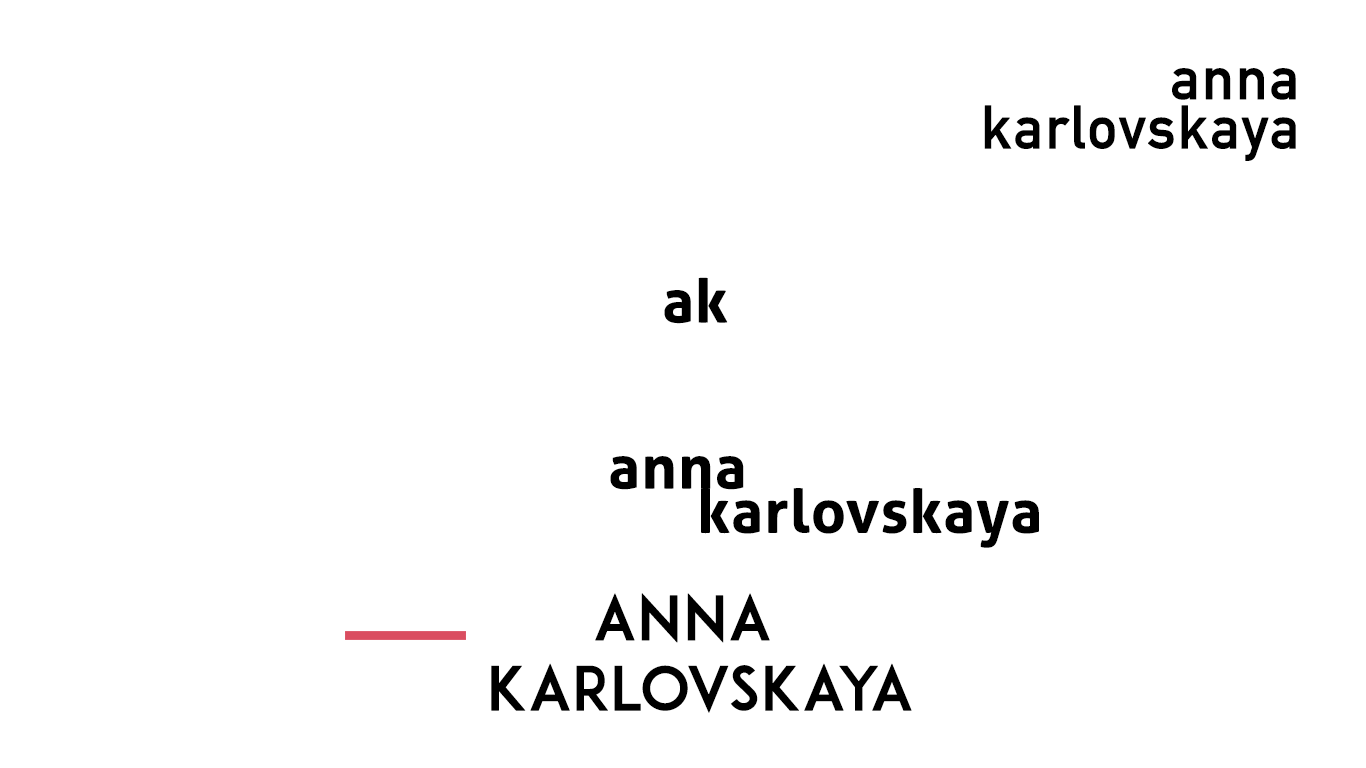
<style>
.page{position:relative;width:1366px;height:768px;background:#ffffff}
.page>*{position:absolute;margin:0}
.t1{font:60px "DINAlternate-Bold";color:#000000;font-weight:bold}
.t2{font:60px "Aller-Bold";color:#000000;font-weight:bold}
.t3{font:60px "ADAM.CGPRO";color:#000000;font-weight:bold}
</style>
<div class="page">
<p class="t1" style="left:1172px;top:68px;width:124px;height:32px">anna</p>
<p class="t1" style="left:984px;top:105px;width:312px;height:56px">karlovskaya</p>
<p class="t2" style="left:664px;top:277px;width:64px;height:47px">ak</p>
<p class="t2" style="left:610px;top:456px;width:134px;height:34px">anna</p>
<p class="t2" style="left:701px;top:488px;width:338px;height:60px">karlovskaya</p>
<p class="t3" style="left:595px;top:593px;width:175px;height:50px">anna</p>
<p class="t3" style="left:491px;top:663px;width:421px;height:50px">karlovskaya</p>
</div>
